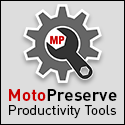
<style>
.page{position:relative;width:125px;height:125px;background:#dddddd}
.page>*{position:absolute;margin:0}
.t1{font:17px "DIN-Bold";letter-spacing:0.004em;color:#000000}
.t2{font:17px "DIN-Bold";letter-spacing:0.004em;color:#cc0000}
.t3{font:14px "DIN-Regular";color:#000000}
</style>
<div class="page">
<p class="t1" style="left:9px;top:89px;width:108px;height:12px"><span class="t2">Moto</span>Preserve</p>
<p class="t3" style="left:9px;top:105px;width:107px;height:14px">Productivity Tools</p>
</div>
